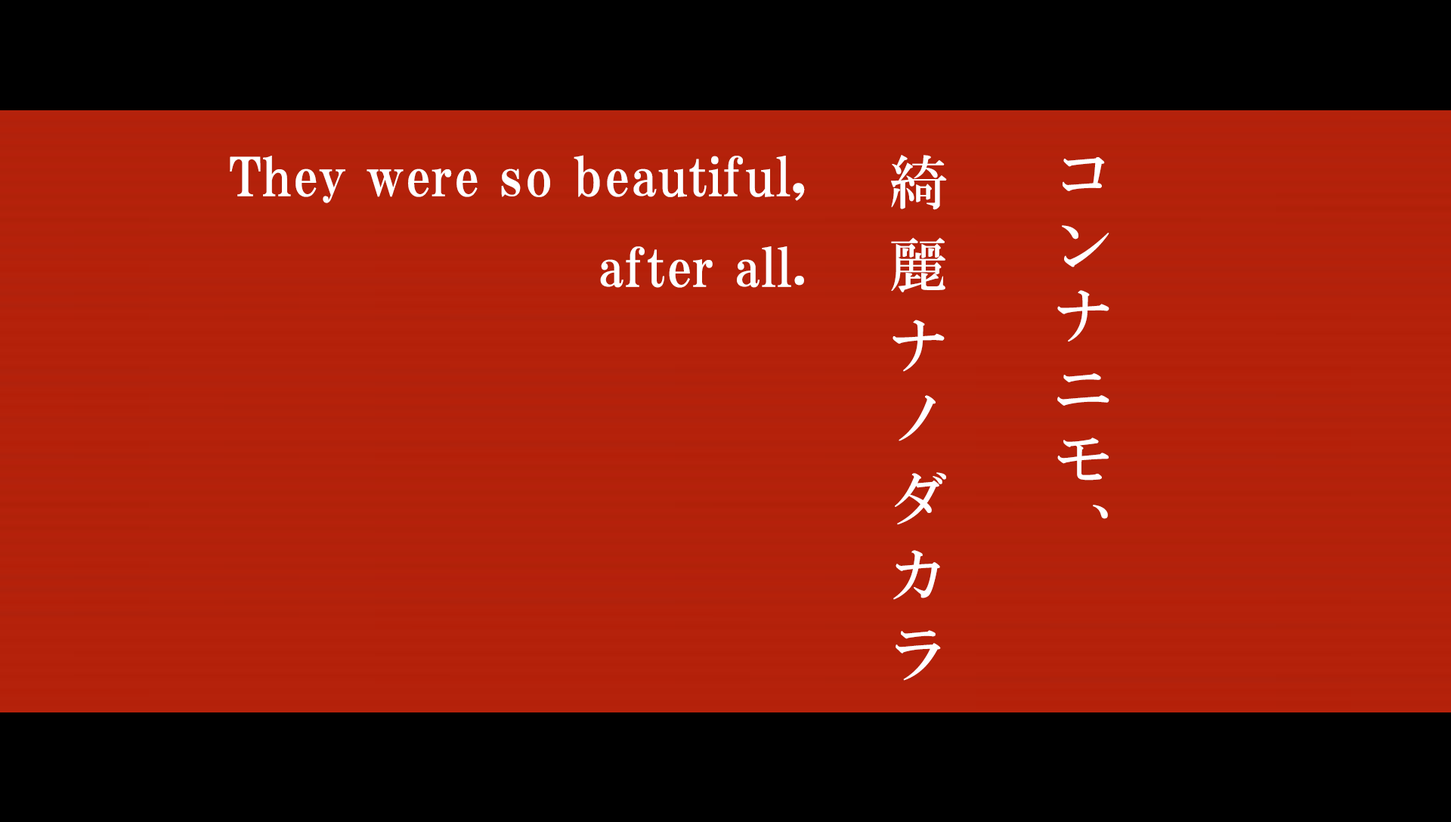
<style>
.page{position:relative;width:1451px;height:822px;background:#000000}
.page>*{position:absolute;margin:0}
.t1{font:52.9px/90.7px "HGPMinchoE";letter-spacing:0.025em;color:#ffffff}
.t2{font:58.2px/164.7px "HGMinchoB";letter-spacing:0.23em;color:#fffeff}
.t3{font:58.2px/164.7px "HGMinchoB";letter-spacing:0.43em;color:#fffeff}
.t4{font:58.2px/164.7px "HGMinchoB";letter-spacing:0.39em;color:#fffeff}
.t5{font:58.2px/164.7px "HGMinchoB";letter-spacing:0.41em;color:#fffeff}
.t6{font:58.2px/164.7px "HGMinchoB";letter-spacing:0.31em;color:#fffeff}
.t7{font:58.2px/164.7px "HGMinchoB";letter-spacing:0.35em;color:#fffeff}
</style>
<div class="page">
<p class="t1" style="left:230px;top:155px;width:575px;height:133px;text-align:right">They were so beautiful,<br>after all.</p>
<p class="t2" style="left:891px;top:155px;width:218px;height:526px">コンナニモ、<br> <span class="t3">綺</span><span class="t4">麗</span>ナ<span class="t5">ノ</span><span class="t6">ダ</span><span class="t7">カ</span>ラ</p>
</div>
